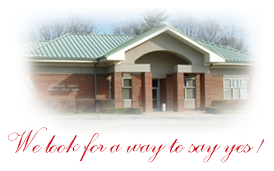
<style>
.page{position:relative;width:274px;height:171px;background:#ffffff}
.page>*{position:absolute;margin:0}
.t1{font:43.3px "PITCH-2D";letter-spacing:-0.05em;color:#cb0a14}
</style>
<div class="page">
<p class="t1" style="left:8px;top:127px;width:257px;height:36px">We look for a way to say yes !</p>
</div>
